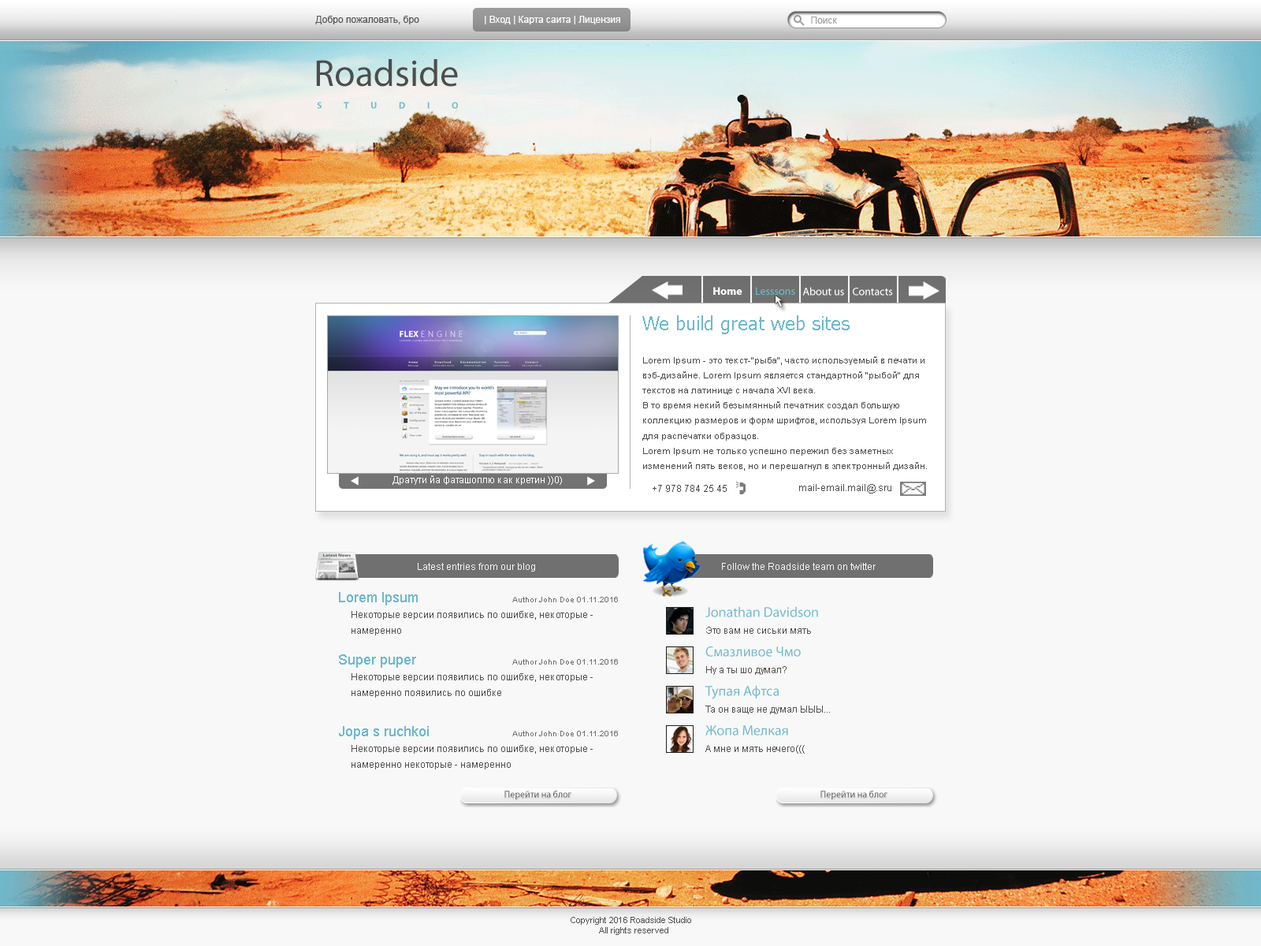
<style>
.page{position:relative;width:1261px;height:946px;background:#f8f8f8}
.page>*{position:absolute;margin:0}
.t1{font:9.5px "ArialMT";color:#515151}
.t2{font:9.5px "ArialMT";color:#ffffff}
.t3{font:9.5px "ArialMT";color:#9f9f9f}
.t4{font:37.8px "MyriadPro-Regular";color:#4d4d4d}
.t5{font:9.5px "MyriadPro-Bold";letter-spacing:2.3em;color:#6ebacd;text-transform:uppercase}
.t6{font:11px "MyriadPro-Bold";color:#ffffff}
.t7{font:11px "MyriadPro-Regular";color:#6eb9cc}
.t8{font:11px "MyriadPro-Regular";color:#ffffff}
.t9{font:18.9px "Tahoma";color:#6eb9cc}
.t10{font:9px/15px "ArialMT";color:#4d4d4d;scale:1.05 1}
.t11{font:9.5px "ArialMT";color:#4d4d4d}
.t12{font:9.5px "ArialMT";color:#f6f6f6}
.t13{font:14.2px "ArialMT";color:#6eb9cc}
.t14{font:7.9px "ArialMT";color:#707070}
.t15{font:9.5px/15.8px "ArialMT";color:#525252}
.t16{font:14.2px "MyriadPro-Regular";color:#6eb9cc}
.t17{font:9.5px "ArialMT";color:#525252}
.t18{font:8.7px "ArialMT";color:#525252}
</style>
<div class="page">
<p class="t1" style="left:315px;top:16px;width:104px;height:8px">Добро пожаловать, бро</p>
<p class="t2" style="left:485px;top:16px;width:135px;height:8px">| Вход | Карта саита | Лицензия</p>
<p class="t3" style="left:811px;top:17px;width:26px;height:7px">Поиск</p>
<p class="t4" style="left:316px;top:59px;width:142px;height:28px">Roadside</p>
<p class="t5" style="left:317px;top:102px;width:141px;height:7px">studio</p>
<p class="t6" style="left:713px;top:287px;width:29px;height:8px">Home</p>
<p class="t7" style="left:756px;top:287px;width:39px;height:8px">Lesssons</p>
<p class="t8" style="left:802px;top:287px;width:42px;height:9px">About us</p>
<p class="t8" style="left:853px;top:288px;width:40px;height:8px">Contacts</p>
<p class="t9" style="left:642px;top:315px;width:208px;height:19px">We build great web sites</p>
<p class="t10" style="left:642px;top:356px;width:285px;height:114px">Lorem Ipsum - это текст-"рыба", часто используемый в печати и вэб-дизайне. Lorem Ipsum является стандартной "рыбой" для текстов на латинице с начала XVI века. <br>В то время некий безымянный печатник создал большую коллекцию размеров и форм шрифтов, используя Lorem Ipsum для распечатки образцов. <br>Lorem Ipsum не только успешно пережил без заметных изменений пять веков, но и перешагнул в электронный дизайн.</p>
<p class="t2" style="left:392px;top:475px;width:170px;height:10px">Дратути йа фаташоплю как кретин ))0)</p>
<p class="t11" style="left:653px;top:485px;width:74px;height:7px">+7 978 784 25 45</p>
<p class="t11" style="left:799px;top:484px;width:92px;height:9px">mail-email.mail@.sru</p>
<p class="t12" style="left:418px;top:563px;width:117px;height:8px">Latest entries from our blog</p>
<p class="t12" style="left:722px;top:563px;width:154px;height:7px">Follow the Roadside team on twitter</p>
<p class="t13" style="left:339px;top:592px;width:79px;height:13px">Lorem Ipsum</p>
<p class="t14" style="left:512px;top:597px;width:106px;height:5px">Author John Doe 01.11.2016</p>
<p class="t15" style="left:351px;top:611px;width:242px;height:24px">Некоторые версии появились по ошибке, некоторые - <br>намеренно</p>
<p class="t16" style="left:705px;top:606px;width:113px;height:11px">Jonathan Davidson</p>
<p class="t17" style="left:706px;top:627px;width:105px;height:7px">Это вам не сиськи мять</p>
<p class="t16" style="left:705px;top:646px;width:96px;height:10px">Смазливое Чмо</p>
<p class="t13" style="left:339px;top:654px;width:77px;height:13px">Super puper</p>
<p class="t14" style="left:512px;top:659px;width:106px;height:5px">Author John Doe 01.11.2016</p>
<p class="t17" style="left:706px;top:666px;width:80px;height:9px">Ну а ты шо думал?</p>
<p class="t15" style="left:351px;top:673px;width:242px;height:24px">Некоторые версии появились по ошибке, некоторые - <br>намеренно появились по ошибке</p>
<p class="t16" style="left:705px;top:685px;width:74px;height:14px">Тупая Афтса</p>
<p class="t17" style="left:705px;top:705px;width:125px;height:9px">Та он ваще не думал ЫЫЫ...</p>
<p class="t13" style="left:339px;top:726px;width:90px;height:13px">Jopa s ruchkoi</p>
<p class="t16" style="left:705px;top:725px;width:83px;height:10px">Жопа Мелкая</p>
<p class="t14" style="left:512px;top:731px;width:106px;height:5px">Author John Doe 01.11.2016</p>
<p class="t15" style="left:351px;top:745px;width:242px;height:24px">Некоторые версии появились по ошибке, некоторые - <br>намеренно некоторые - намеренно</p>
<p class="t17" style="left:705px;top:745px;width:100px;height:8px">А мне и мять нечего(((</p>
<p class="t18" style="left:571px;top:917px;width:120px;height:18px">Copyright 2016 Roadside Studio<br> All rights reserved</p>
</div>
